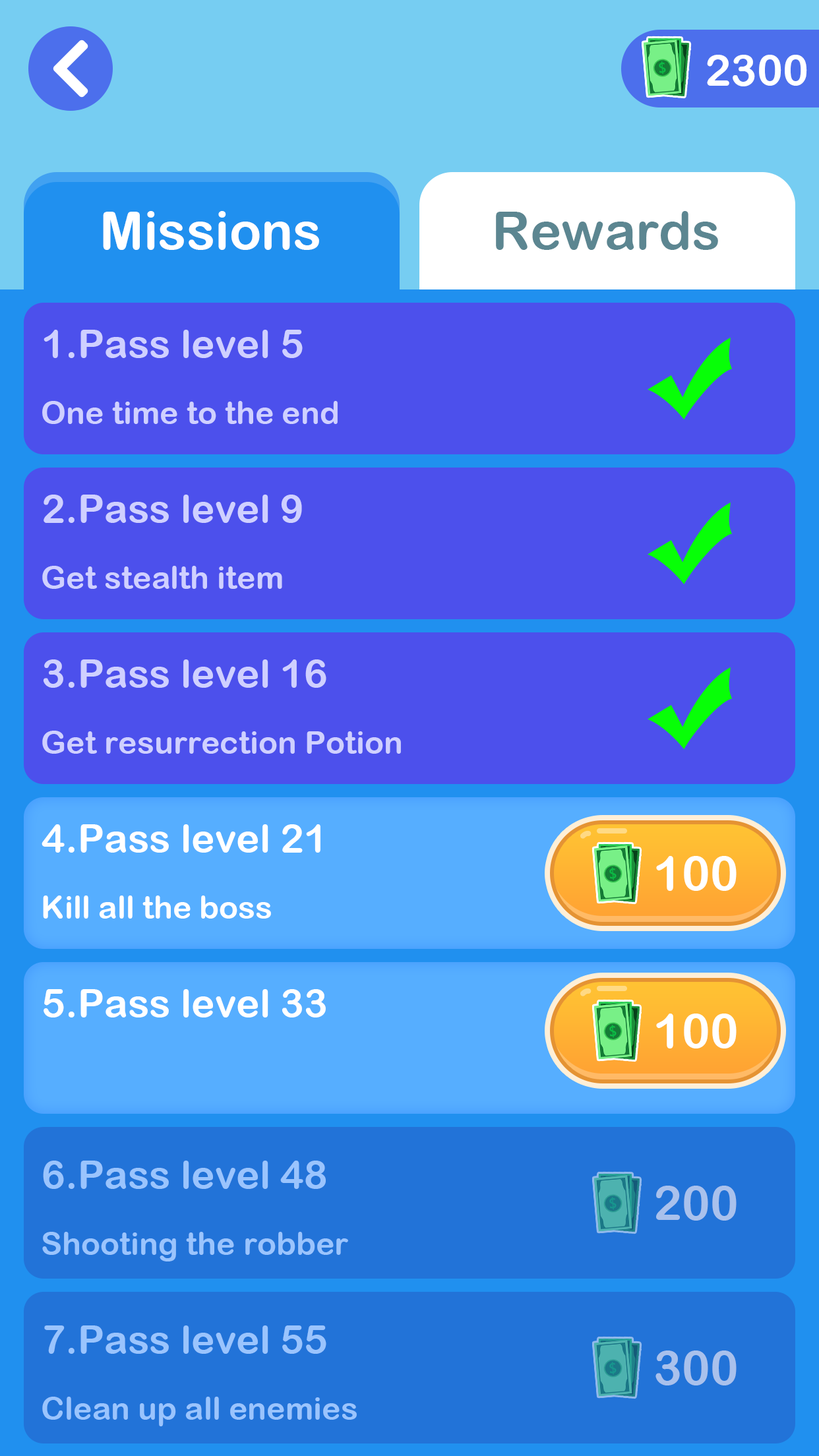
<style>
.page{position:relative;width:819px;height:1456px;background:#4c50ec}
.page>*{position:absolute;margin:0}
.t1{font:43.5px "ArialRoundedMTBold";color:#ffffff}
.t2{font:52.8px "ArialRoundedMTBold";color:#ffffff}
.t3{font:52.8px "ArialRoundedMTBold";color:#5c8691}
.t4{font:39.6px "ArialRoundedMTBold";color:#cfd0ff}
.t5{font:31.7px "ArialRoundedMTBold";color:#cfd0ff}
.t6{font:39.6px "ArialRoundedMTBold";color:#ffffff}
.t7{font:47.5px "ArialRoundedMTBold";color:#ffffff}
.t8{font:31.7px "ArialRoundedMTBold";color:#ffffff}
.t9{font:39.6px "ArialRoundedMTBold";color:#9ac4fd}
.t10{font:47.5px "ArialRoundedMTBold";color:#a9c1ec}
.t11{font:31.7px "ArialRoundedMTBold";color:#9ac4fd}
</style>
<div class="page">
<p class="t1" style="left:707px;top:55px;width:100px;height:31px">2300</p>
<p class="t2" style="left:103px;top:211px;width:216px;height:39px">Missions</p>
<p class="t3" style="left:496px;top:211px;width:222px;height:39px">Rewards</p>
<p class="t4" style="left:44px;top:330px;width:259px;height:28px">1.Pass level 5</p>
<p class="t5" style="left:42px;top:401px;width:296px;height:23px">One time to the end</p>
<p class="t4" style="left:44px;top:495px;width:258px;height:28px">2.Pass level 9</p>
<p class="t5" style="left:42px;top:566px;width:240px;height:23px">Get stealth item</p>
<p class="t4" style="left:43px;top:659px;width:283px;height:29px">3.Pass level 16</p>
<p class="t5" style="left:42px;top:731px;width:359px;height:23px">Get resurrection Potion</p>
<p class="t6" style="left:42px;top:824px;width:278px;height:29px">4.Pass level 21</p>
<p class="t7" style="left:656px;top:856px;width:81px;height:35px">100</p>
<p class="t8" style="left:43px;top:895px;width:228px;height:24px">Kill all the boss</p>
<p class="t6" style="left:44px;top:989px;width:282px;height:28px">5.Pass level 33</p>
<p class="t7" style="left:656px;top:1014px;width:81px;height:34px">100</p>
<p class="t9" style="left:43px;top:1161px;width:283px;height:28px">6.Pass level 48</p>
<p class="t10" style="left:656px;top:1186px;width:81px;height:35px">200</p>
<p class="t11" style="left:42px;top:1232px;width:306px;height:29px">Shooting the robber</p>
<p class="t9" style="left:44px;top:1325px;width:282px;height:29px">7.Pass level 55</p>
<p class="t10" style="left:655px;top:1350px;width:82px;height:35px">300</p>
<p class="t11" style="left:42px;top:1397px;width:315px;height:29px">Clean up all enemies</p>
</div>
